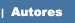
<style>
.page{position:relative;width:75px;height:23px;background:#4775a3}
.page>*{position:absolute;margin:0}
.t1{font:12px "Arial-Black";color:#ffffff}
.t2{font:10px "Arial-Black";color:#ffffff}
</style>
<div class="page">
<p class="t1" style="left:1px;top:7px;width:62px;height:11px"><span class="t2">| </span> Autores</p>
</div>
